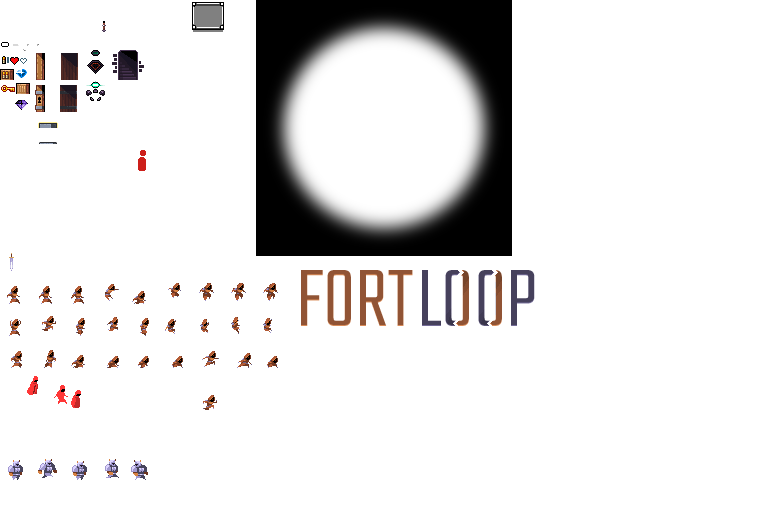
<style>
.page{position:relative;width:768px;height:512px;background:#ffffff}
.page>*{position:absolute;margin:0}
.t1{font:90px "Teko-Light";color:#915435}
.t2{font:90px "Teko-Light";color:#46415c}
</style>
<div class="page">
<p class="t1" style="left:301px;top:270px;width:112px;height:56px">FORT</p>
<p class="t2" style="left:422px;top:270px;width:113px;height:56px">LOOP</p>
</div>
